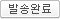
<style>
.page{position:relative;width:60px;height:19px}
.page>*{position:absolute;margin:0}
.t1{font:12px "morris9";color:#4f4f4f}
</style>
<div class="page">
<p class="t1" style="left:9px;top:4px;width:42px;height:10px">발송완료</p>
</div>
